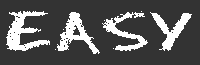
<style>
.page{position:relative;width:200px;height:65px;background:#333333}
.page>*{position:absolute;margin:0}
.t1{font:49.8px "Eraser-Regular";color:#ffffff;scale:1.46 1}
</style>
<div class="page">
<p class="t1" style="left:6px;top:11px;width:186px;height:43px">EASY</p>
</div>
